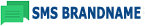
<style>
.page{position:relative;width:145px;height:26px;background:#ffffff}
.page>*{position:absolute;margin:0}
.t1{font:16px "Verdana-Bold";color:#084685;scale:0.68 1}
</style>
<div class="page">
<p class="t1" style="left:32px;top:6px;width:109px;height:13px">SMS BRANDNAME</p>
</div>
